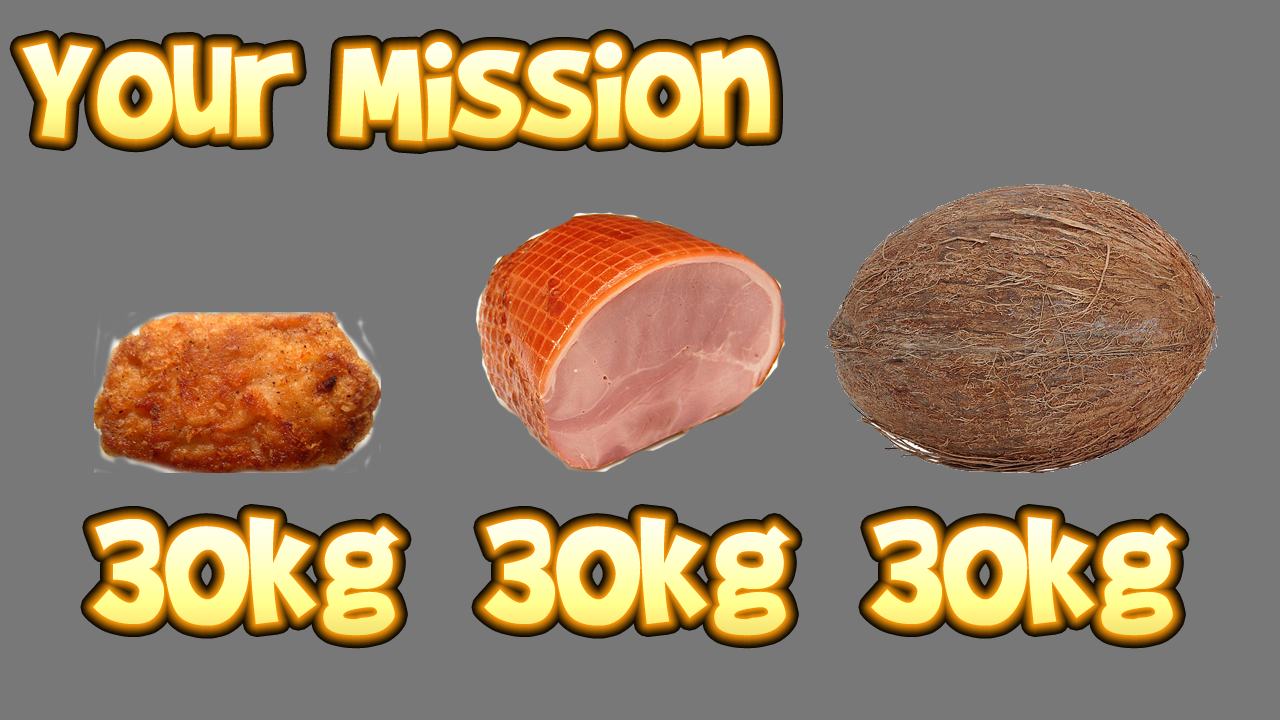
<style>
.page{position:relative;width:1280px;height:720px;background:#787878}
.page>*{position:absolute;margin:0}
.t1{font:167.9px "BradyBunchRemastered"}
</style>
<div class="page">
<p class="t1" style="left:22px;top:42px;width:748px;height:99px">Your Mission</p>
<p class="t1" style="left:93px;top:517px;width:306px;height:119px">30kg</p>
<p class="t1" style="left:484px;top:517px;width:306px;height:119px">30kg</p>
<p class="t1" style="left:871px;top:517px;width:306px;height:119px">30kg</p>
</div>
